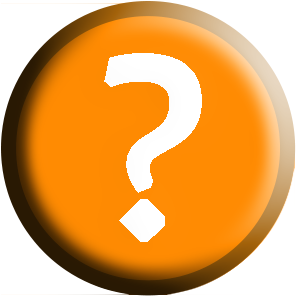
<style>
.page{position:relative;width:298px;height:296px;background:#ffffff}
.page>*{position:absolute;margin:0}
.t1{font:345.8px "SakkalMajalla";letter-spacing:0.1em;color:#ffffff;font-weight:bold}
</style>
<div class="page">
<p class="t1" style="left:104px;top:53px;width:98px;height:189px">?</p>
</div>
